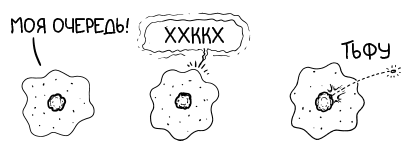
<style>
.page{position:relative;width:413px;height:153px;background:#ffffff}
.page>*{position:absolute;margin:0}
.t1{font:20.8px "SarcasmInk";color:#000000}
.t2{font:22.2px "SarcasmInk";color:#000000}
</style>
<div class="page">
<p class="t1" style="left:11px;top:17px;width:118px;height:18px">МоЯ очередь!</p>
<p class="t2" style="left:164px;top:27px;width:60px;height:17px">ХХККХ</p>
<p class="t2" style="left:341px;top:40px;width:49px;height:20px">ТЬФУ</p>
</div>
